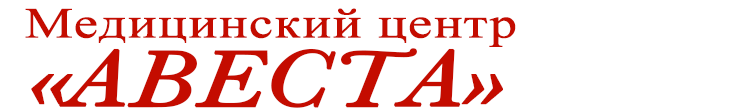
<style>
.page{position:relative;width:735px;height:112px;background:#ffffff}
.page>*{position:absolute;margin:0}
.t1{font:43.2px "TimesNewRomanPSMT";color:#c40c00;font-weight:bold;scale:1.25 1}
.t2{font:81.6px "Baskerville-Italic";color:#c40c00;font-weight:bold;scale:1.29 1}
.t3{font:81.6px "Baskerville-Italic";color:#c40c00;font-weight:bold;scale:1.18 1}
</style>
<div class="page">
<p class="t1" style="left:25px;top:8px;width:491px;height:39px">Медицинский центр</p>
<p class="t2" style="left:31px;top:48px;width:472px;height:60px"><span class="t3">«</span>АВЕСТА<span class="t3">»</span></p>
</div>
